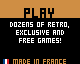
<style>
.page{position:relative;width:80px;height:64px;background:#000000}
.page>*{position:absolute;margin:0}
.t1{font:7px "PixelGosub";color:#ffffff}
.t2{font:14px "PixelGosub";color:#000000}
.t3{font:7px "PixelGosub";color:#cf8e44}
</style>
<div class="page">
<p class="t1" style="left:10px;top:8px;width:59px;height:35px;text-align:center"><span class="t2">Play<br></span>Dozens of retro,<br>exclusive and<br>free games!</p>
<p class="t3" style="left:13px;top:59px;width:53px;height:5px">Made in France</p>
</div>
